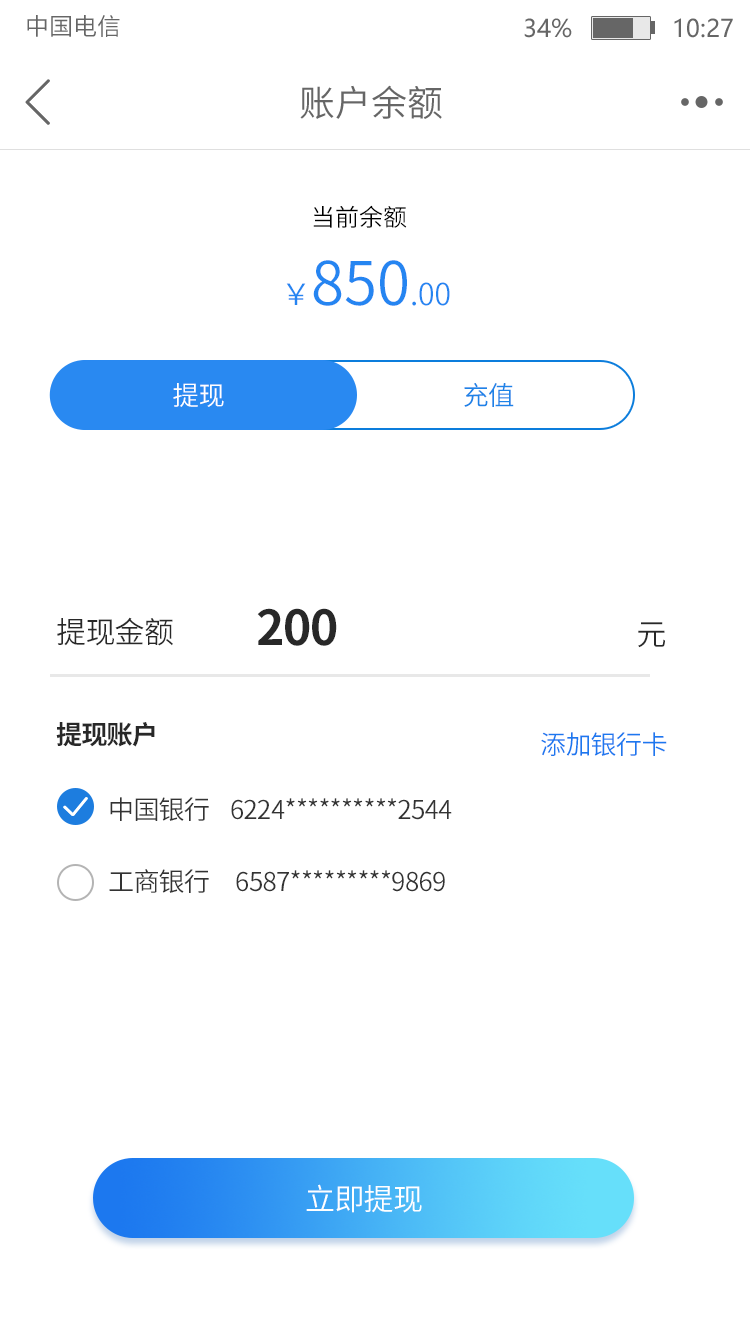
<style>
.page{position:relative;width:750px;height:1336px;background:#ffffff}
.page>*{position:absolute;margin:0}
.t1{font:24px "SourceHanSansCN-Normal";color:#666666}
.t2{font:24px "MicrosoftYaHei";color:#666666}
.t3{font:36px "SourceHanSansCN-Normal";color:#666666}
.t4{font:24px "SourceHanSansCN-Normal";color:#000000}
.t5{font:60px "SourceHanSansCN-Normal";color:#2585f1}
.t6{font:30px "SourceHanSansCN-Normal";color:#2585f1}
.t7{font:26.2px "SourceHanSansCN-Normal";letter-spacing:-0.025em;color:#ffffff}
.t8{font:26.2px "SourceHanSansCN-Normal";letter-spacing:-0.025em;color:#1d83e7}
.t9{font:30px "SourceHanSansCN-Normal";letter-spacing:-0.025em;color:#282828}
.t10{font:26px "SourceHanSansCN-Bold";letter-spacing:-0.025em;color:#282828}
.t11{font:48px "SourceHanSansCN-Bold";letter-spacing:-0.025em;color:#282828}
.t12{font:26px "SourceHanSansCN-Normal";letter-spacing:-0.025em;color:#1c78ef}
.t13{font:26px/72px "SourceHanSansCN-Normal";letter-spacing:-0.025em;color:#333333}
.t14{font:30px "SourceHanSansCN-Normal";letter-spacing:-0.025em;color:#ffffff}
</style>
<div class="page">
<p class="t1" style="left:27px;top:15px;width:93px;height:22px">中国电信</p>
<p class="t2" style="left:524px;top:18px;width:209px;height:20px">34%              10:27</p>
<p class="t3" style="left:300px;top:85px;width:142px;height:34px">账户余额</p>
<p class="t4" style="left:313px;top:205px;width:94px;height:23px">当前余额</p>
<p class="t5" style="left:286px;top:260px;width:164px;height:46px"><span class="t6">￥</span>850<span class="t6">.00</span></p>
<p class="t7" style="left:173px;top:383px;width:51px;height:24px">提现</p>
<p class="t8" style="left:464px;top:383px;width:50px;height:24px">充值</p>
<p class="t9" style="left:56px;top:617px;width:117px;height:130px">提现金额<br><br><span class="t10">提现账户</span></p>
<p class="t11" style="left:257px;top:608px;width:408px;height:40px">200                                         <span class="t9">元</span></p>
<p class="t12" style="left:541px;top:732px;width:126px;height:24px">添加银行卡</p>
<p class="t13" style="left:109px;top:797px;width:343px;height:96px">中国银行    6224**********2544<br>工商银行     6587*********9869</p>
<p class="t14" style="left:306px;top:1184px;width:116px;height:29px">立即提现</p>
</div>
